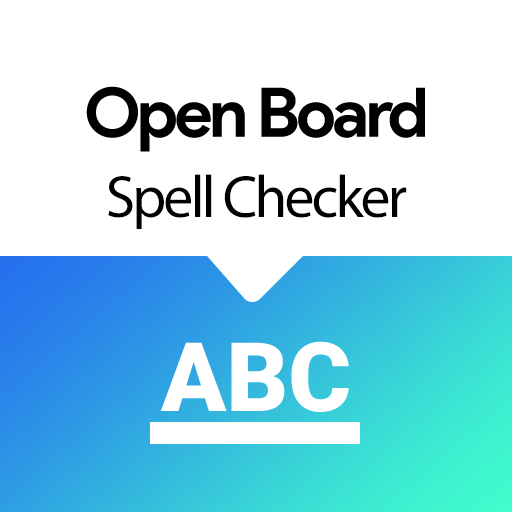
<style>
.page{position:relative;width:512px;height:512px;background:#ffffff}
.page>*{position:absolute;margin:0}
.t1{font:68.5px "ProductSans-Bold";letter-spacing:-0.05em;color:#000000}
.t2{font:60px "MyriadPro-Regular";letter-spacing:-0.05em;color:#000000}
</style>
<div class="page">
<p class="t1" style="left:86px;top:86px;width:339px;height:66px">Open Board</p>
<p class="t2" style="left:108px;top:174px;width:299px;height:55px">Spell Checker</p>
</div>
